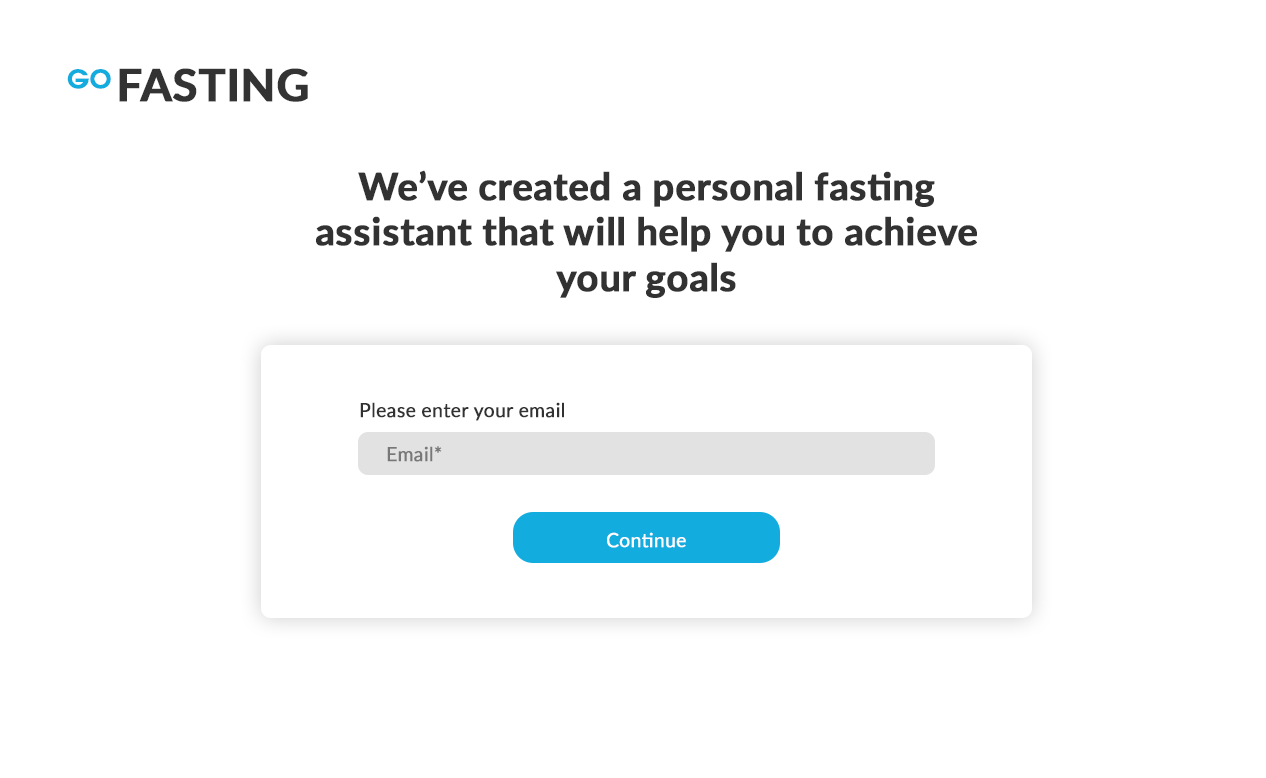
<style>
.page{position:relative;width:1266px;height:778px;background:#ffffff}
.page>*{position:absolute;margin:0}
.t1{font:25.5px "TeXGyreAdventor-Bold";color:#12acdf;font-weight:bold}
.t2{font:44.5px "Lato-Bold";color:#333333;font-weight:bold}
.t3{font:38px "Lato-Bold";color:#323232;font-weight:bold}
.t4{font:19.2px "Lato-Regular";color:#323232;font-weight:bold}
.t5{font:19.2px "Lato-Regular";color:#777777;font-weight:bold}
.t6{font:19.2px "Lato-Regular";color:#ffffff;font-weight:bold}
</style>
<div class="page">
<p class="t1" style="left:67px;top:69px;width:44px;height:20px">GO</p>
<p class="t2" style="left:119px;top:68px;width:189px;height:34px">FASTING</p>
<p class="t3" style="left:316px;top:170px;width:661px;height:128px;text-align:center">We’ve created a personal fasting assistant that will help you to achieve your goals</p>
<p class="t4" style="left:360px;top:402px;width:204px;height:19px">Please enter your email</p>
<p class="t5" style="left:387px;top:446px;width:55px;height:16px">Email*</p>
<p class="t6" style="left:607px;top:532px;width:79px;height:16px">Continue</p>
</div>
